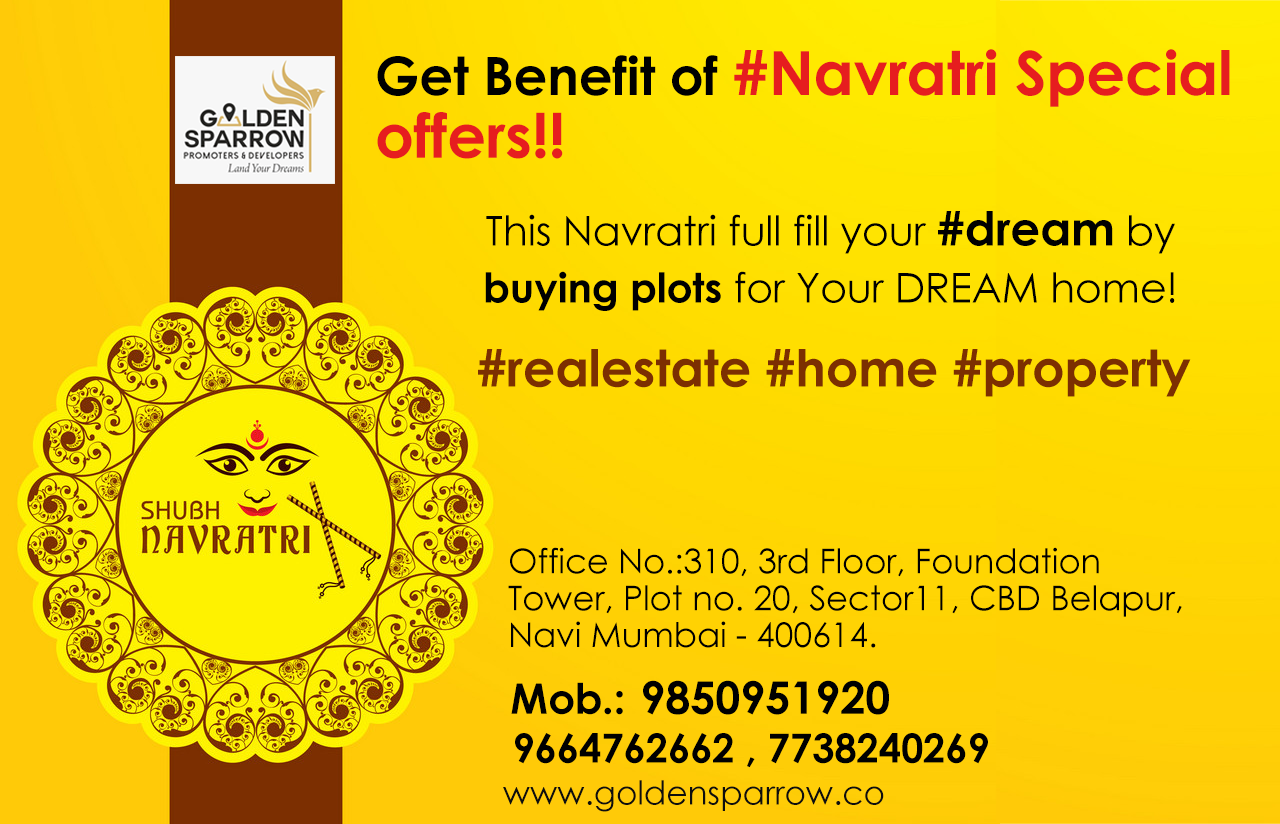
<style>
.page{position:relative;width:1280px;height:824px}
.page>*{position:absolute;margin:0}
.t1{font:61px/63px "CenturyGothic-Bold";letter-spacing:-0.005em;color:#e61d1f}
.t2{font:53px/63px "CenturyGothic-Bold";letter-spacing:-0.005em;color:#000000}
.t3{font:41px/57px "CenturyGothic";letter-spacing:-0.005em;color:#000000}
.t4{font:47px/57px "CenturyGothic-Bold";letter-spacing:-0.005em;color:#000000}
.t5{font:41px/57px "CenturyGothic-Bold";letter-spacing:-0.005em;color:#000000}
.t6{font:51px "CenturyGothic-Bold";letter-spacing:-0.005em;color:#7c2f01}
.t7{font:34px/37px "CenturyGothic";letter-spacing:-0.005em;color:#000000}
.t8{font:45px "CenturyGothic-Bold";letter-spacing:-0.005em;color:#000000}
.t9{font:42px "CenturyGothic-Bold";letter-spacing:-0.005em;color:#000000}
.t10{font:40px "CenturyGothic-Bold";letter-spacing:-0.005em;color:#000000}
.t11{font:33px "CenturyGothic";letter-spacing:-0.005em;color:#0e0e0e}
</style>
<div class="page">
<p class="t1" style="left:377px;top:49px;width:853px;height:110px"><span class="t2">Get Benefit of </span>#Navratri Special offers!!</p>
<p class="t3" style="left:485px;top:211px;width:690px;height:100px;text-align:center">This Navratri full fill your <span class="t4">#dream</span> by <span class="t5">buying plots</span> for Your DREAM home!</p>
<p class="t6" style="left:478px;top:349px;width:713px;height:48px">#realestate #home #property</p>
<p class="t7" style="left:508px;top:547px;width:674px;height:101px">Office No.:310, 3rd Floor, Foundation Tower, Plot no. 20, Sector11, CBD Belapur, Navi Mumbai - 400614.</p>
<p class="t8" style="left:511px;top:680px;width:378px;height:35px"><span class="t9">Mob.: </span>9850951920</p>
<p class="t10" style="left:515px;top:733px;width:473px;height:35px">9664762662 , 7738240269</p>
<p class="t11" style="left:503px;top:780px;width:381px;height:32px">www.goldensparrow.co</p>
</div>
